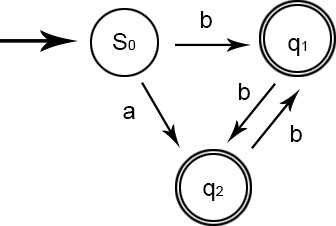
<style>
.page{position:relative;width:336px;height:226px;background:#ffffff}
.page>*{position:absolute;margin:0}
.t1{font:24px "ArialMT";color:#000000}
.t2{font:14px "ArialMT";color:#000000}
</style>
<div class="page">
<p class="t1" style="left:200px;top:11px;width:12px;height:17px">b</p>
<p class="t1" style="left:113px;top:33px;width:23px;height:17px">S<span class="t2">0</span></p>
<p class="t1" style="left:288px;top:38px;width:19px;height:18px">q<span class="t2">1</span></p>
<p class="t1" style="left:238px;top:83px;width:12px;height:17px">b</p>
<p class="t1" style="left:123px;top:106px;width:12px;height:13px">a</p>
<p class="t1" style="left:290px;top:125px;width:12px;height:17px">b</p>
<p class="t1" style="left:203px;top:183px;width:20px;height:18px">q<span class="t2">2</span></p>
</div>
